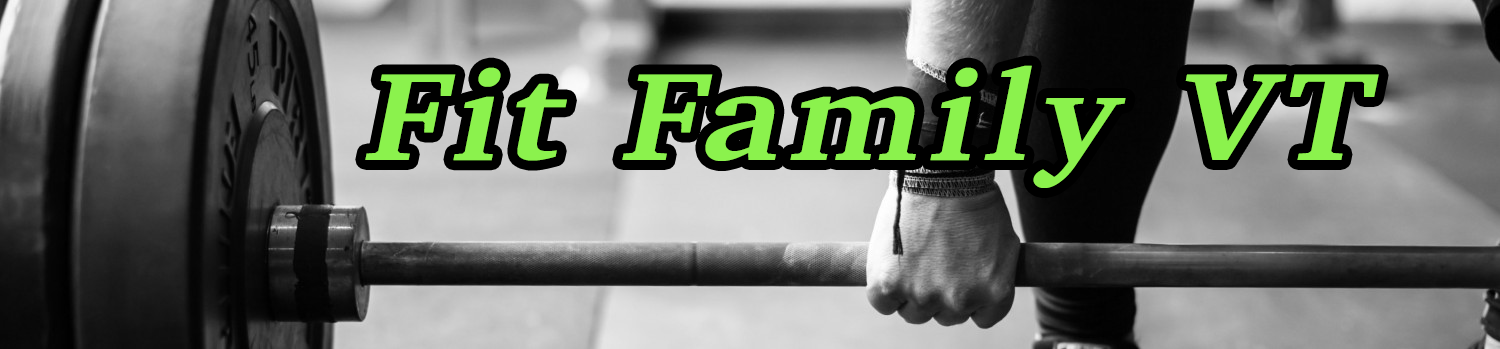
<style>
.page{position:relative;width:1500px;height:349px}
.page>*{position:absolute;margin:0}
.t1{font:127.4px "Charter-Bold";letter-spacing:0.07em;color:#8bf24d;font-style:italic;scale:1.14 1}
</style>
<div class="page">
<p class="t1" style="left:365px;top:65px;width:1014px;height:123px">Fit Family VT</p>
</div>
